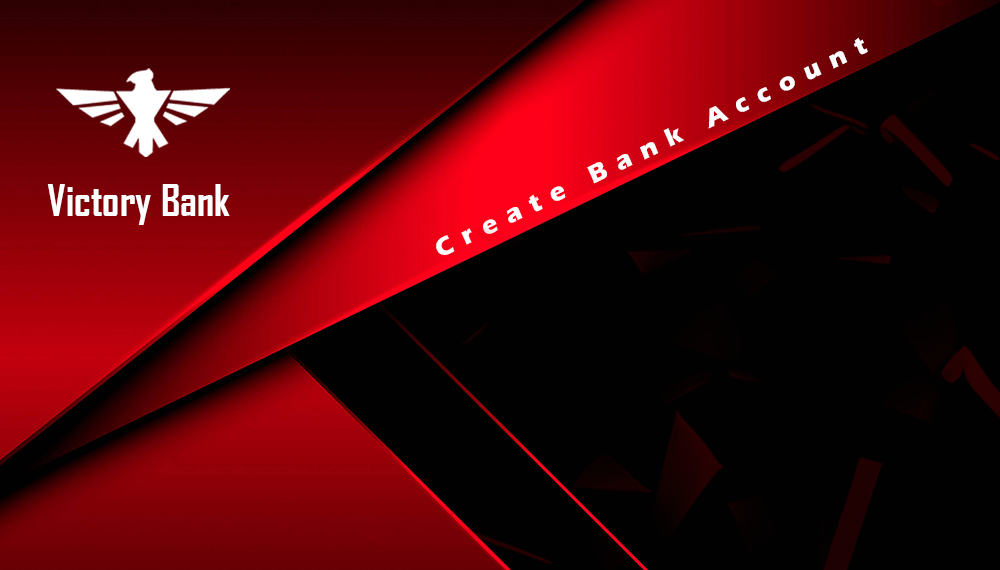
<style>
.page{position:relative;width:1000px;height:570px;background:#010101}
.page>*{position:absolute;margin:0}
.t1{font:26.1px "ErasITC-Bold";letter-spacing:0.42em;color:#ffffff}
.t2{font:42.3px "AgencyFB-Bold";color:#ffffff}
</style>
<div class="page">
<p class="t1" style="left:436px;top:37px;width:432px;height:218px;rotate:-26deg">Create Bank Account</p>
<p class="t2" style="left:47px;top:184px;width:183px;height:41px">Victory Bank</p>
</div>
